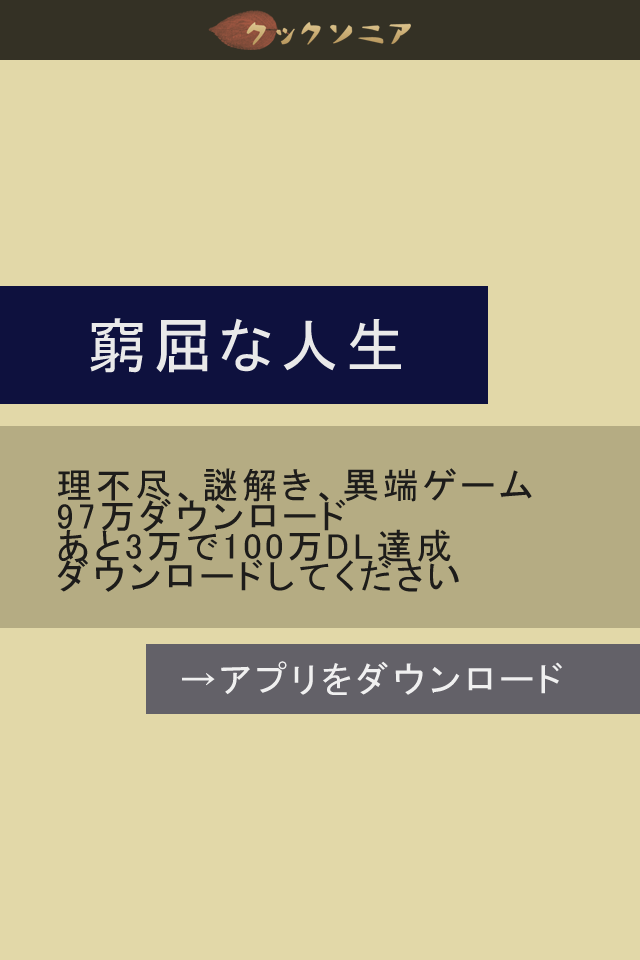
<style>
.page{position:relative;width:640px;height:960px;background:#e2d8a8}
.page>*{position:absolute;margin:0}
.t1{font:60px "MS-PGothic";letter-spacing:0.1em;color:#e9e9e9}
.t2{font:36px/30px "MS-PGothic";letter-spacing:0.1em;color:#1d1c1a}
.t3{font:36px "MS-PGothic";letter-spacing:0.1em;color:#f0f0f0}
</style>
<div class="page">
<p class="t1" style="left:90px;top:318px;width:311px;height:55px">窮屈な人生</p>
<p class="t2" style="left:57px;top:468px;width:475px;height:124px">理不尽、謎解き、異端ゲーム<br>97万ダウンロード<br>あと3万で100万DL達成<br>ダウンロードしてください</p>
<p class="t3" style="left:182px;top:661px;width:380px;height:34px">→アプリをダウンロード</p>
</div>
